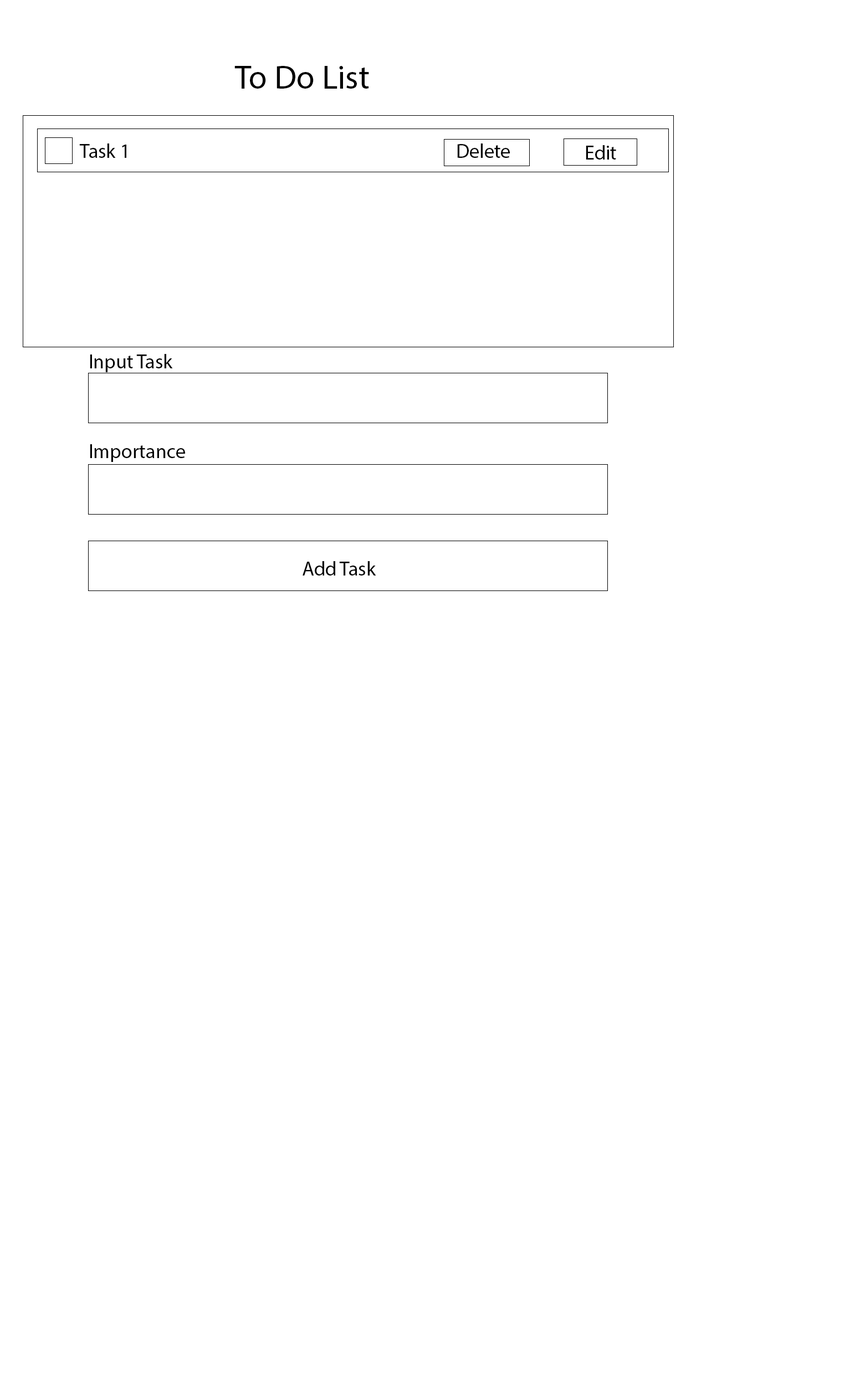
<style>
.page{position:relative;width:860px;height:1387px;background:#ffffff}
.page>*{position:absolute;margin:0}
.t1{font:33.2px "MyriadPro-Regular";color:#000000}
.t2{font:19.9px "MyriadPro-Regular";color:#000000}
</style>
<div class="page">
<p class="t1" style="left:234px;top:66px;width:135px;height:23px">To Do List</p>
<p class="t2" style="left:79px;top:143px;width:47px;height:15px">Task 1</p>
<p class="t2" style="left:457px;top:143px;width:53px;height:15px">Delete</p>
<p class="t2" style="left:586px;top:145px;width:30px;height:15px">Edit</p>
<p class="t2" style="left:90px;top:354px;width:83px;height:18px">Input Task</p>
<p class="t2" style="left:90px;top:444px;width:95px;height:18px">Importance</p>
<p class="t2" style="left:302px;top:561px;width:74px;height:15px">Add Task</p>
</div>
